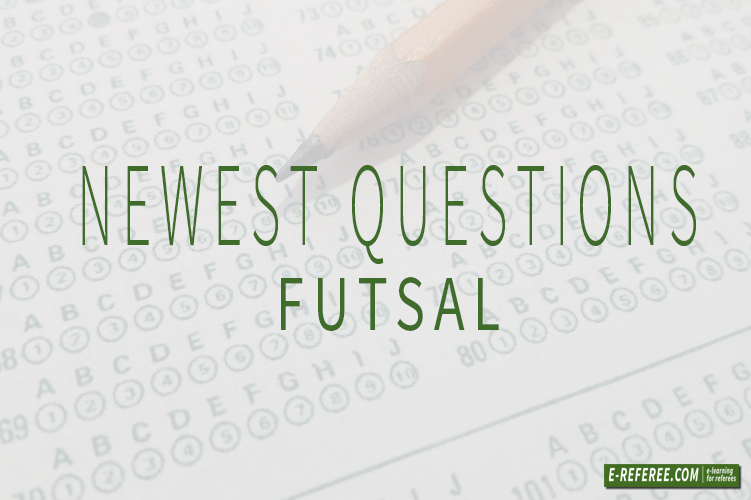
<style>
.page{position:relative;width:751px;height:500px}
.page>*{position:absolute;margin:0}
.t1{font:120px "SourceSansPro-Light";letter-spacing:0.16em;color:#406c2b;scale:0.48 1}
.t2{font:79.9px "SourceSansPro-Regular";letter-spacing:0.16em;color:#406c2b;scale:0.71 1}
</style>
<div class="page">
<p class="t1" style="left:82px;top:165px;width:614px;height:99px">NEWEST QUESTIONS</p>
<p class="t2" style="left:281px;top:277px;width:218px;height:54px">FUTSAL</p>
</div>
